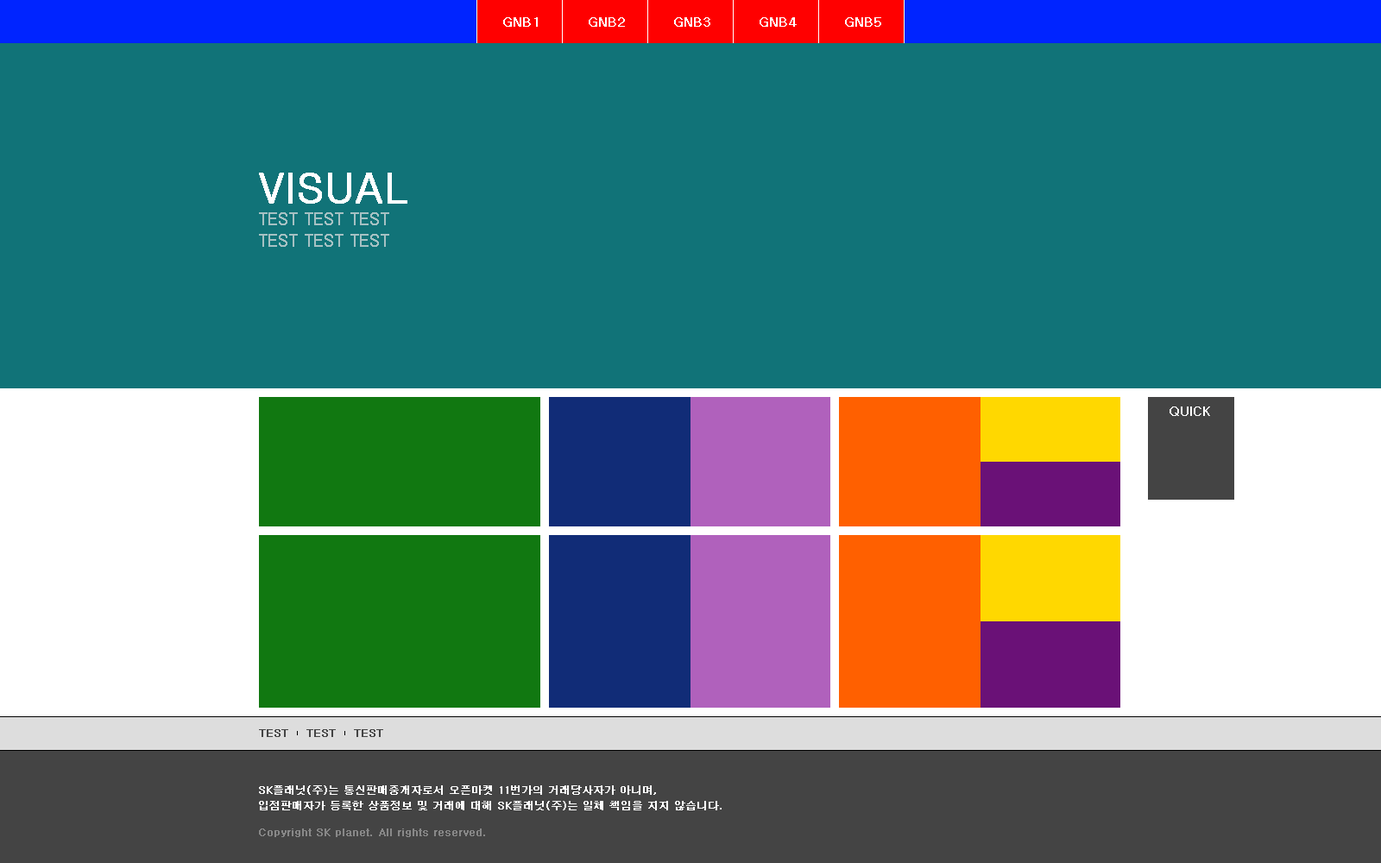
<style>
.page{position:relative;width:1381px;height:863px;background:#117378}
.page>*{position:absolute;margin:0}
.t1{font:12.1px "Dotum";color:#ffffff;font-weight:bold}
.t2{font:41.4px "Dotum";color:#ffffff;font-weight:bold}
.t3{font:15.5px "Dotum";color:#a6c1c3;font-weight:bold}
.t4{font:10.4px "Dotum";color:#444444;font-weight:bold}
.t5{font:10.4px/15.5px "Dotum";color:#ffffff;font-weight:bold}
.t6{font:10.4px "Dotum";color:#888888;font-weight:bold}
</style>
<div class="page">
<p class="t1" style="left:503px;top:17px;width:35px;height:10px">GNB1</p>
<p class="t1" style="left:589px;top:17px;width:36px;height:10px">GNB2</p>
<p class="t1" style="left:674px;top:17px;width:36px;height:10px">GNB3</p>
<p class="t1" style="left:760px;top:17px;width:37px;height:10px">GNB4</p>
<p class="t1" style="left:845px;top:17px;width:36px;height:10px">GNB5</p>
<p class="t2" style="left:259px;top:173px;width:148px;height:31px">VISUAL</p>
<p class="t3" style="left:259px;top:212px;width:130px;height:13px">TEST TEST TEST</p>
<p class="t3" style="left:259px;top:234px;width:130px;height:13px">TEST TEST TEST</p>
<p class="t1" style="left:1170px;top:407px;width:40px;height:9px">QUICK</p>
<p class="t4" style="left:259px;top:729px;width:29px;height:8px">TEST</p>
<p class="t4" style="left:306px;top:729px;width:30px;height:8px">TEST</p>
<p class="t4" style="left:354px;top:729px;width:29px;height:8px">TEST</p>
<p class="t5" style="left:259px;top:786px;width:463px;height:25px">SK플래닛(주)는 통신판매중개자로서 오픈마켓 11번가의 거래당사자가 아니며, <br>입점판매자가 등록한 상품정보 및 거래에 대해 SK플래닛(주)는 일체 책임을 지지 않습니다.</p>
<p class="t6" style="left:259px;top:829px;width:226px;height:8px">Copyright SK planet. All rights reserved.</p>
</div>
